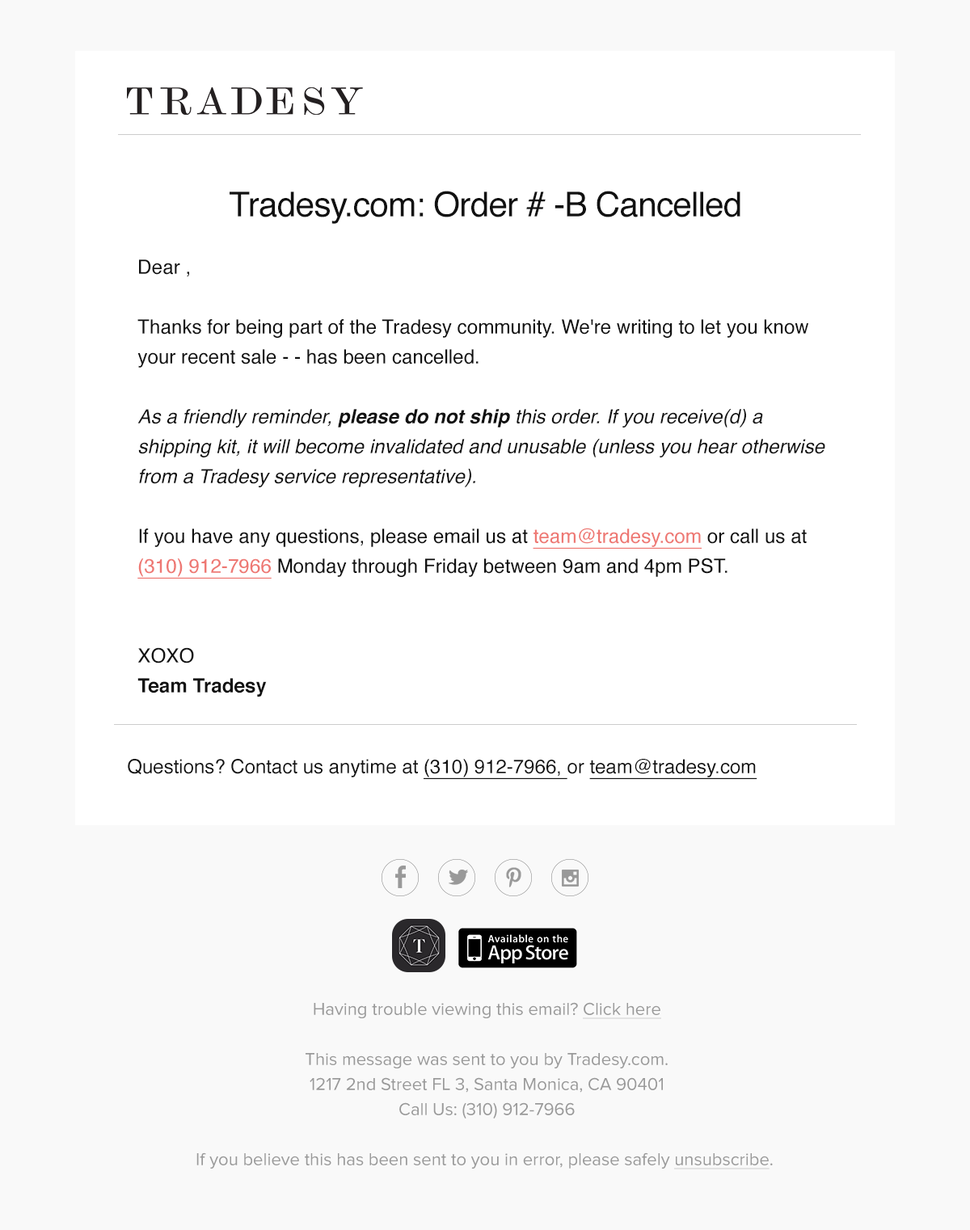
<style>
.page{position:relative;width:970px;height:1230px;background:#ffffff}
.page>*{position:absolute;margin:0}
.t1{font:34.3px "Helvetica";letter-spacing:-0.02em;color:#111111}
.t2{font:19.5px/29.9px "Helvetica-Oblique";color:#111111}
.t3{font:19.5px/29.9px "Helvetica";color:#111111}
.t4{font:19.5px/29.9px "Helvetica-BoldOblique";color:#111111}
.t5{font:19.5px/29.9px "Helvetica";color:#ee7873;text-decoration:underline}
.t6{font:19.5px/29.9px "Helvetica-Bold";color:#111111}
.t7{font:19.4px "Helvetica";color:#111111}
.t8{font:19.4px "Helvetica";color:#111111;text-decoration:underline}
.t9{font:17.8px/25px "ProximaNova-Regular";color:#999999}
.t10{font:17.8px/25px "ProximaNova-Regular";color:#999999;text-decoration:underline}
</style>
<div class="page">
<p class="t1" style="left:229px;top:191px;width:511px;height:33px">Tradesy.com: Order # -B Cancelled</p>
<p class="t2" style="left:137px;top:259px;width:688px;height:438px"><span class="t3">Dear ,<br><br>Thanks for being part of the Tradesy community. We're writing to let you know your recent sale - - has been cancelled.<br><br></span>As a friendly reminder, <span class="t4">please do not ship</span> this order. If you receive(d) a shipping kit, it will become invalidated and unusable (unless you hear otherwise from a Tradesy service representative).<br><span class="t3"><br>If you have any questions, please email us at </span><span class="t5">team@tradesy.com</span><span class="t3"> or call us at </span><span class="t5">(310) 912-7966</span><span class="t3"> Monday through Friday between 9am and 4pm PST.<br><br><br>XOXO<br></span><span class="t6">Team Tradesy</span></p>
<p class="t7" style="left:128px;top:759px;width:629px;height:20px">Questions? Contact us anytime at <span class="t8">(310) 912-7966, </span>or <span class="t8">team@tradesy.com</span></p>
<p class="t9" style="left:196px;top:1002px;width:576px;height:167px;text-align:center">Having trouble viewing this email? <span class="t10">Click here<br></span><br>This message was sent to you by Tradesy.com.<br>1217 2nd Street FL 3, Santa Monica, CA 90401<br>Call Us: (310) 912-7966<br><br>If you believe this has been sent to you in error, please safely <span class="t10">unsubscribe</span>.</p>
</div>
